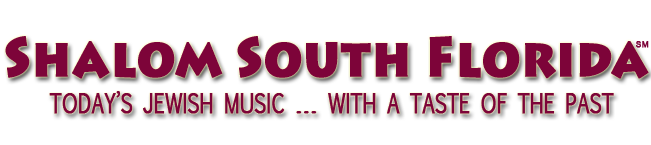
<style>
.page{position:relative;width:651px;height:145px;background:#ffffff}
.page>*{position:absolute;margin:0}
.t1{font:55.6px "LithosPro-Black";color:#7d0439;font-variant:small-caps;font-weight:bold;scale:0.85 1}
.t2{font:8.4px "ArialMT";color:#7d0439;font-variant:small-caps;font-weight:bold}
.t3{font:25.6px "EuphemiaUCAS";color:#7d0439;text-transform:uppercase;font-weight:bold;scale:0.76 1}
.t4{font:25.6px "EuphemiaUCAS";color:#7d0439;text-transform:uppercase;font-weight:bold;scale:1.25 1}
</style>
<div class="page">
<p class="t1" style="left:5px;top:36px;width:644px;height:43px">Shalom South Florida</p>
<p class="t2" style="left:636px;top:41px;width:13px;height:7px">SM</p>
<p class="t3" style="left:49px;top:91px;width:565px;height:23px">Today’s Jewish Music <span class="t4">...</span> With a Taste of the Past</p>
</div>
